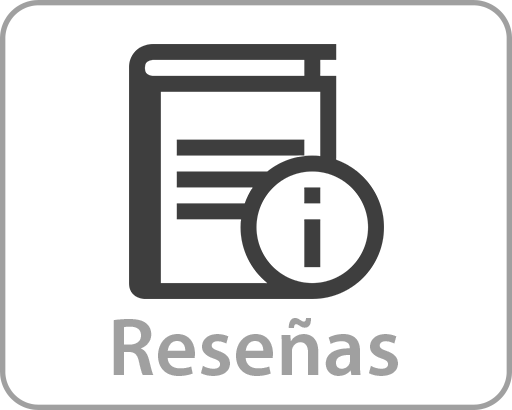
<style>
.page{position:relative;width:512px;height:410px;background:#ffffff}
.page>*{position:absolute;margin:0}
.t1{font:83.3px "MyriadPro-Semibold";color:#a0a0a0}
</style>
<div class="page">
<p class="t1" style="left:113px;top:318px;width:285px;height:58px">Reseñas</p>
</div>
